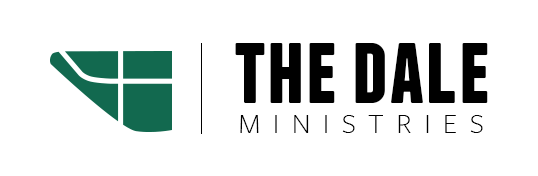
<style>
.page{position:relative;width:538px;height:176px;background:#ffffff}
.page>*{position:absolute;margin:0}
.t1{font:99.9px "Franchise-Bold";color:#000000}
.t2{font:28.9px "FreightSans-LightSC";letter-spacing:0.44em;color:#000000}
</style>
<div class="page">
<p class="t1" style="left:235px;top:43px;width:253px;height:60px">the dale</p>
<p class="t2" style="left:240px;top:115px;width:243px;height:18px">MINISTRIES</p>
</div>
